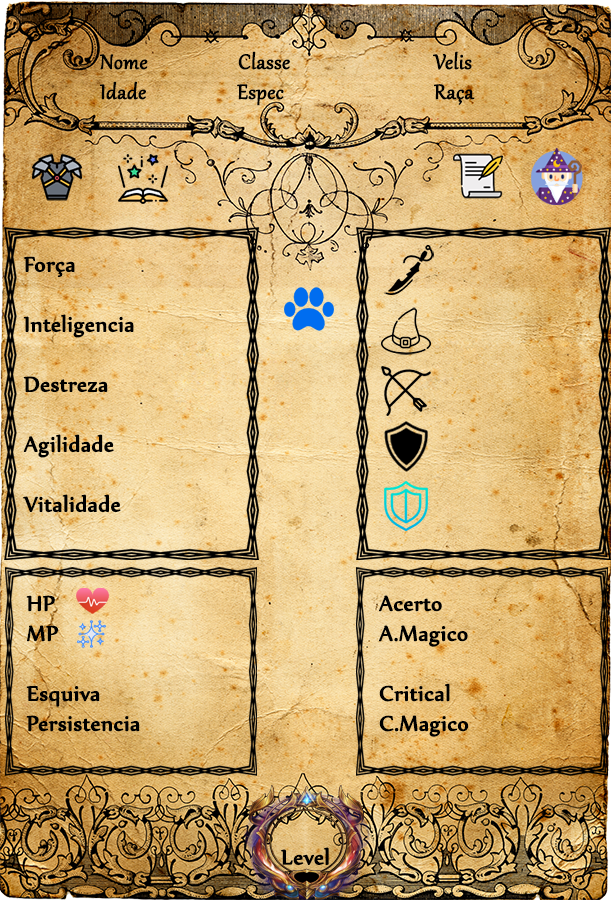
<style>
.page{position:relative;width:611px;height:900px}
.page>*{position:absolute;margin:0}
.t1{font:25px "Gabriola";color:#000000;font-weight:bold}
.t2{font:25px "Nyala-Regular";color:#000000;font-weight:bold}
</style>
<div class="page">
<p class="t1" style="left:99px;top:51px;width:376px;height:55px">Nome        Classe             Velis<br>Idade                  Espec       Raça</p>
<p class="t2" style="left:23px;top:256px;width:111px;height:257px">Força<br><br>Inteligencia<br><br>Destreza<br><br>Agilidade<br><br>Vitalidade</p>
<p class="t2" style="left:26px;top:595px;width:114px;height:137px">HP <br>MP<br><br>Esquiva<br>Persistencia</p>
<p class="t2" style="left:379px;top:595px;width:90px;height:142px">Acerto<br>A.Magico<br><br>Critical<br>C.Magico</p>
<p class="t2" style="left:281px;top:847px;width:48px;height:18px">Level</p>
</div>
